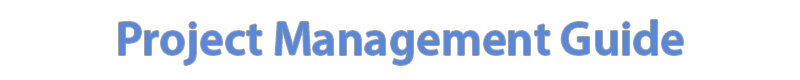
<style>
.page{position:relative;width:800px;height:80px;background:#ffffff}
.page>*{position:absolute;margin:0}
.t1{font:48px "MyriadPro-Semibold";color:#5988da}
</style>
<div class="page">
<p class="t1" style="left:119px;top:20px;width:564px;height:45px">Project Management Guide</p>
</div>
